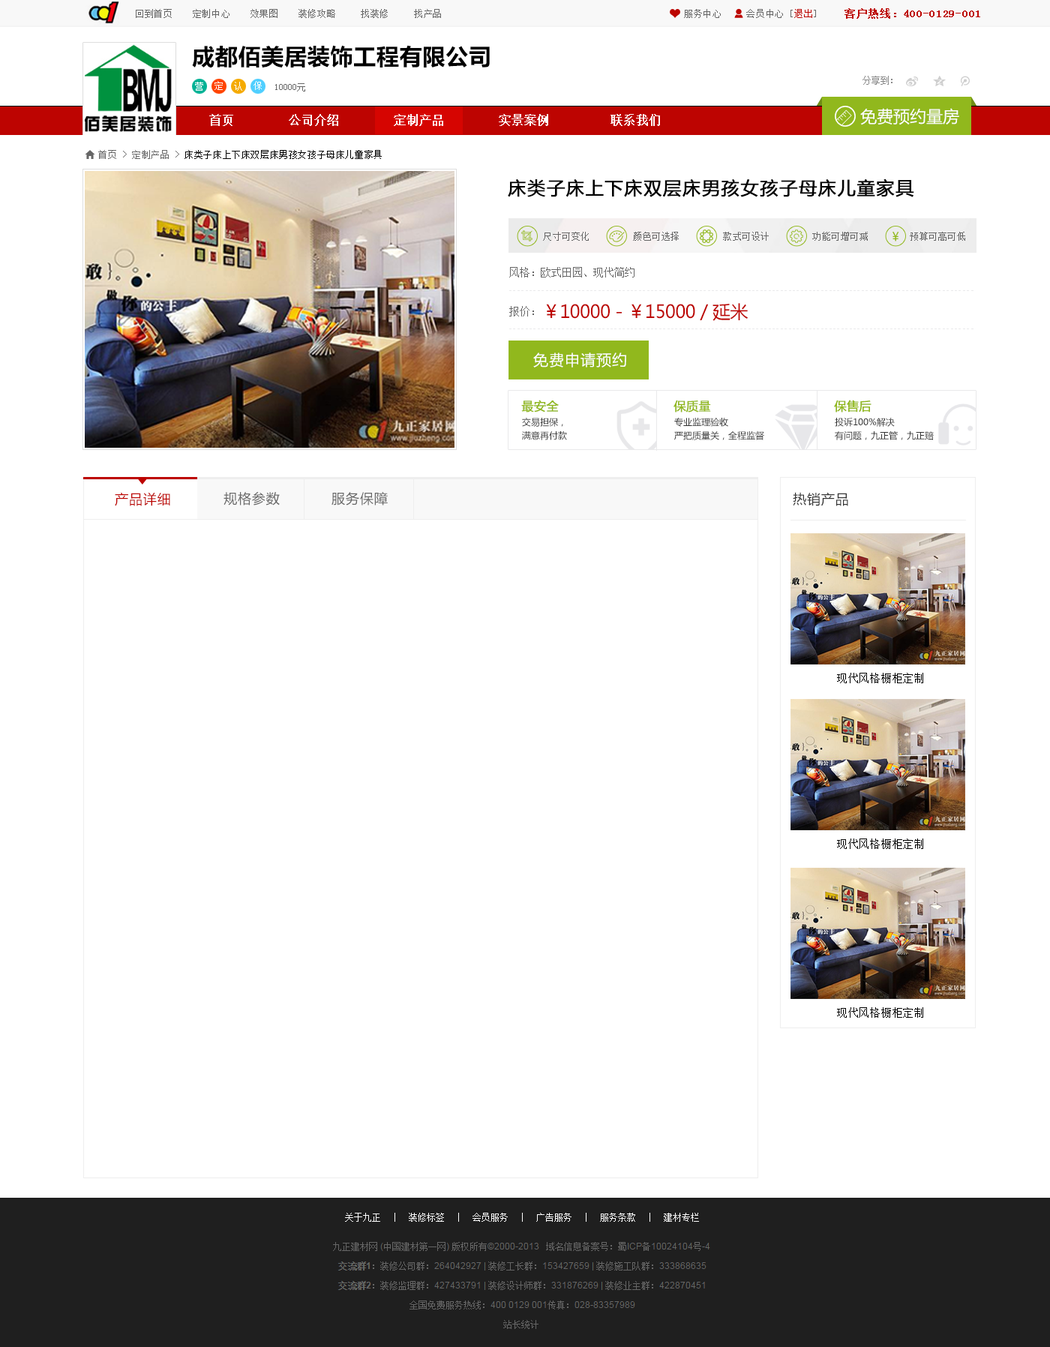
<style>
.page{position:relative;width:1050px;height:1347px;background:#ffffff}
.page>*{position:absolute;margin:0}
.t1{font:9px "NSimSun";letter-spacing:0.05em;color:#666666}
.t2{font:9px "NSimSun";letter-spacing:0.05em;color:#bc0500}
.t3{font:10.5px "NSimSun";letter-spacing:0.05em;color:#bc0500;font-weight:bold}
.t4{font:22.5px "MicrosoftYaHei-Bold";letter-spacing:0.025em;color:#000000}
.t5{font:9px "NSimSun";letter-spacing:0.075em;color:#ffffff}
.t6{font:9px "NSimSun";color:#666666}
.t7{font:16.5px "MicrosoftYaHei";color:#ffffff}
.t8{font:12px "NSimSun";color:#ffffff;font-weight:bold}
.t9{font:9px "NSimSun";letter-spacing:0.05em;color:#000000}
.t10{font:18px "MicrosoftYaHei";letter-spacing:0.05em;color:#000000;font-weight:bold}
.t11{font:10.5px/19.5px "NSimSun";color:#666666}
.t12{font:4.5px "NSimSun";letter-spacing:0.4em;color:#e9e9eb}
.t13{font:18px "MicrosoftYaHei";letter-spacing:-0.025em;color:#bd0401}
.t14{font:15px "MicrosoftYaHei";letter-spacing:0.05em;color:#ffffff}
.t15{font:12px "MicrosoftYaHei";color:#91b81d;font-weight:bold}
.t16{font:9px/13.5px "MicrosoftYaHei";color:#333333}
.t17{font:13.5px "MicrosoftYaHei";letter-spacing:0.05em;color:#bd0401}
.t18{font:13.5px "MicrosoftYaHei";letter-spacing:0.05em;color:#666666}
.t19{font:13.5px "MicrosoftYaHei";letter-spacing:0.05em;color:#333333}
.t20{font:10.5px "NSimSun";letter-spacing:0.05em;color:#000000}
</style>
<div class="page">
<p class="t1" style="left:136px;top:9px;width:305px;height:9px">回到首页    定制中心    效果图    装修攻略     找装修     找产品</p>
<p class="t1" style="left:684px;top:9px;width:132px;height:9px">服务中心     会员中心 [<span class="t2">退出</span>]</p>
<p class="t3" style="left:844px;top:8px;width:136px;height:11px">客户热线：400-0129-001</p>
<p class="t4" style="left:192px;top:45px;width:298px;height:23px">成都佰美居装饰工程有限公司</p>
<p class="t5" style="left:195px;top:82px;width:8px;height:9px">营</p>
<p class="t5" style="left:214px;top:81px;width:9px;height:9px">定</p>
<p class="t5" style="left:234px;top:82px;width:8px;height:9px">认</p>
<p class="t5" style="left:254px;top:81px;width:8px;height:9px">保</p>
<p class="t6" style="left:275px;top:83px;width:30px;height:9px">10000元</p>
<p class="t7" style="left:860px;top:108px;width:99px;height:17px">免费预约量房</p>
<p class="t8" style="left:209px;top:114px;width:451px;height:12px">首页        公司介绍        定制产品        实景案例         联系我们</p>
<p class="t9" style="left:98px;top:150px;width:284px;height:9px"><span class="t1">首页 &gt; 定制产品 &gt; </span>床类子床上下床双层床男孩女孩子母床儿童家具</p>
<p class="t10" style="left:508px;top:178px;width:406px;height:19px">床类子床上下床双层床男孩女孩子母床儿童家具</p>
<p class="t1" style="left:543px;top:232px;width:46px;height:9px">尺寸可变化</p>
<p class="t1" style="left:633px;top:232px;width:46px;height:9px">颜色可选择</p>
<p class="t1" style="left:723px;top:232px;width:46px;height:9px">款式可设计</p>
<p class="t1" style="left:812px;top:232px;width:56px;height:9px">功能可增可减</p>
<p class="t1" style="left:910px;top:232px;width:55px;height:9px">预算可高可低</p>
<p class="t11" style="left:509px;top:267px;width:125px;height:49px">风格：欧式田园、现代简约<br><br>报价：</p>
<p class="t12" style="left:509px;top:290px;width:465px;height:1px">-------------------------------------------------------------------------------------------------------------------</p>
<p class="t13" style="left:546px;top:303px;width:202px;height:18px">￥10000 - ￥15000 / 延米</p>
<p class="t12" style="left:509px;top:328px;width:465px;height:1px">-------------------------------------------------------------------------------------------------------------------</p>
<p class="t14" style="left:533px;top:352px;width:93px;height:16px">免费申请预约</p>
<p class="t15" style="left:521px;top:400px;width:38px;height:12px">最安全</p>
<p class="t15" style="left:674px;top:400px;width:37px;height:12px">保质量</p>
<p class="t15" style="left:834px;top:400px;width:38px;height:12px">保售后</p>
<p class="t16" style="left:522px;top:418px;width:45px;height:22px;text-align:center">交易担保，<br>满意再付款</p>
<p class="t16" style="left:674px;top:418px;width:90px;height:22px">专业监理验收<br>严把质量关，全程监督</p>
<p class="t16" style="left:835px;top:418px;width:99px;height:22px">投诉100%解决<br>有问题，九正管，九正赔</p>
<p class="t17" style="left:115px;top:492px;width:55px;height:14px">产品详细</p>
<p class="t18" style="left:224px;top:491px;width:164px;height:15px">规格参数           服务保障</p>
<p class="t19" style="left:793px;top:492px;width:55px;height:14px">热销产品</p>
<p class="t20" style="left:837px;top:673px;width:86px;height:10px">现代风格橱柜定制</p>
<p class="t20" style="left:837px;top:838px;width:86px;height:11px">现代风格橱柜定制</p>
<p class="t20" style="left:837px;top:1007px;width:86px;height:11px">现代风格橱柜定制</p>
</div>
